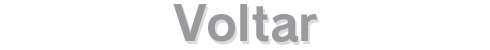
<style>
.page{position:relative;width:490px;height:50px;background:#ffffff}
.page>*{position:absolute;margin:0}
.t1{font:48px "RodinPro-B";color:#989a9d}
</style>
<div class="page">
<p class="t1" style="left:173px;top:4px;width:144px;height:38px">Voltar</p>
</div>
